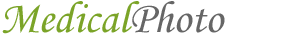
<style>
.page{position:relative;width:300px;height:35px;background:#ffffff}
.page>*{position:absolute;margin:0}
.t1{font:45px "MonotypeCorsiva";color:#7ba428}
.t2{font:45px "MonotypeCorsiva";color:#666666}
</style>
<div class="page">
<p class="t1" style="left:2px;top:1px;width:223px;height:33px">Medical<span class="t2">Photo</span></p>
</div>
